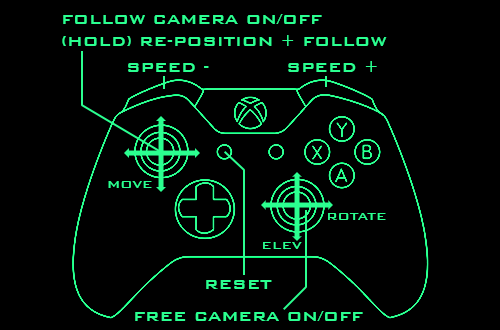
<style>
.page{position:relative;width:500px;height:330px;background:#000000}
.page>*{position:absolute;margin:0}
.t1{font:18px "BankGothicBT-Medium";color:#2bff90}
.t2{font:14px "BankGothicBT-Medium";color:#2bff90}
</style>
<div class="page">
<p class="t1" style="left:62px;top:14px;width:325px;height:32px">FOLLOW CAMERA ON/OFF<br>(HOLD) RE-POSITION + FOLLOW</p>
<p class="t1" style="left:128px;top:63px;width:81px;height:9px">SPEED -</p>
<p class="t1" style="left:288px;top:61px;width:89px;height:11px">SPEED +</p>
<p class="t2" style="left:108px;top:181px;width:44px;height:7px">MOVE</p>
<p class="t2" style="left:328px;top:213px;width:58px;height:7px">ROTATE</p>
<p class="t2" style="left:263px;top:242px;width:39px;height:7px">ELEV</p>
<p class="t1" style="left:206px;top:280px;width:66px;height:9px">RESET</p>
<p class="t1" style="left:135px;top:311px;width:228px;height:10px">FREE CAMERA ON/OFF</p>
</div>
